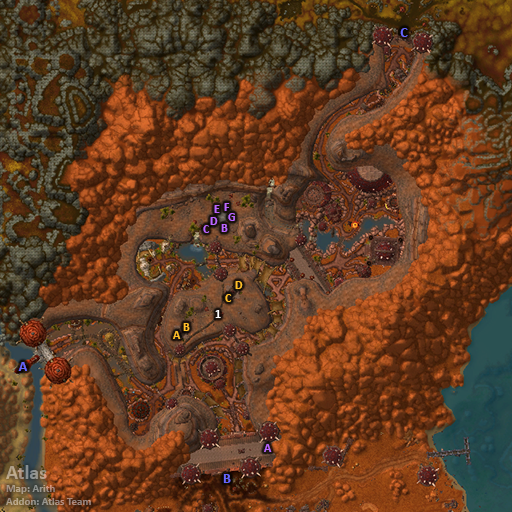
<style>
.page{position:relative;width:512px;height:512px}
.page>*{position:absolute;margin:0}
.t1{font:14px "Calibri-Bold";color:#6666ff}
.t2{font:12px "Calibri-Bold";color:#bb66ff}
.t3{font:12px "Calibri-Bold";color:#ffbf28}
.t4{font:12px "Calibri-Bold";color:#ffffff}
.t5{font:11px "Calibri-Bold"}
.t6{font:20px "Calibri-Bold"}
</style>
<div class="page">
<p class="t1" style="left:400px;top:28px;width:8px;height:9px">C</p>
<p class="t2" style="left:214px;top:205px;width:6px;height:8px">E</p>
<p class="t2" style="left:224px;top:203px;width:6px;height:8px">F</p>
<p class="t2" style="left:210px;top:217px;width:8px;height:8px">D</p>
<p class="t2" style="left:228px;top:213px;width:7px;height:8px">G</p>
<p class="t2" style="left:203px;top:225px;width:7px;height:8px">C</p>
<p class="t2" style="left:221px;top:224px;width:7px;height:8px">B</p>
<p class="t3" style="left:235px;top:281px;width:8px;height:8px">D</p>
<p class="t3" style="left:225px;top:294px;width:7px;height:8px">C</p>
<p class="t4" style="left:215px;top:310px;width:6px;height:8px">1</p>
<p class="t3" style="left:183px;top:323px;width:7px;height:8px">B</p>
<p class="t3" style="left:173px;top:331px;width:8px;height:8px">A</p>
<p class="t1" style="left:18px;top:362px;width:9px;height:9px">A</p>
<p class="t2" style="left:264px;top:444px;width:8px;height:8px">A</p>
<p class="t5" style="left:6px;top:465px;width:85px;height:40px"><span class="t6">Atlas<br></span>Map: Arith<br>Addon: Atlas Team</p>
<p class="t1" style="left:223px;top:474px;width:8px;height:9px">B</p>
</div>
